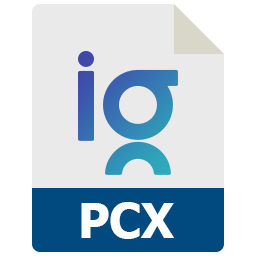
<style>
.page{position:relative;width:256px;height:256px;background:#eaeaea}
.page>*{position:absolute;margin:0}
.t1{font:48px "Tahoma-Bold";color:#ffffff}
</style>
<div class="page">
<p class="t1" style="left:81px;top:202px;width:93px;height:37px">PCX</p>
</div>
